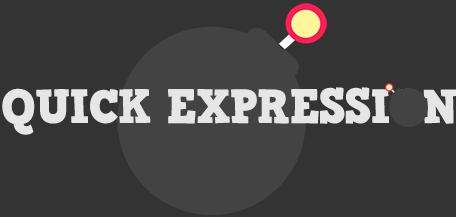
<style>
.page{position:relative;width:456px;height:217px;background:#333333}
.page>*{position:absolute;margin:0}
.t1{font:48px "HVDComicSerifPro";letter-spacing:-0.03em;color:#e6e6e6}
</style>
<div class="page">
<p class="t1" style="left:2px;top:87px;width:455px;height:48px">QUICK EXPRESSION</p>
</div>
